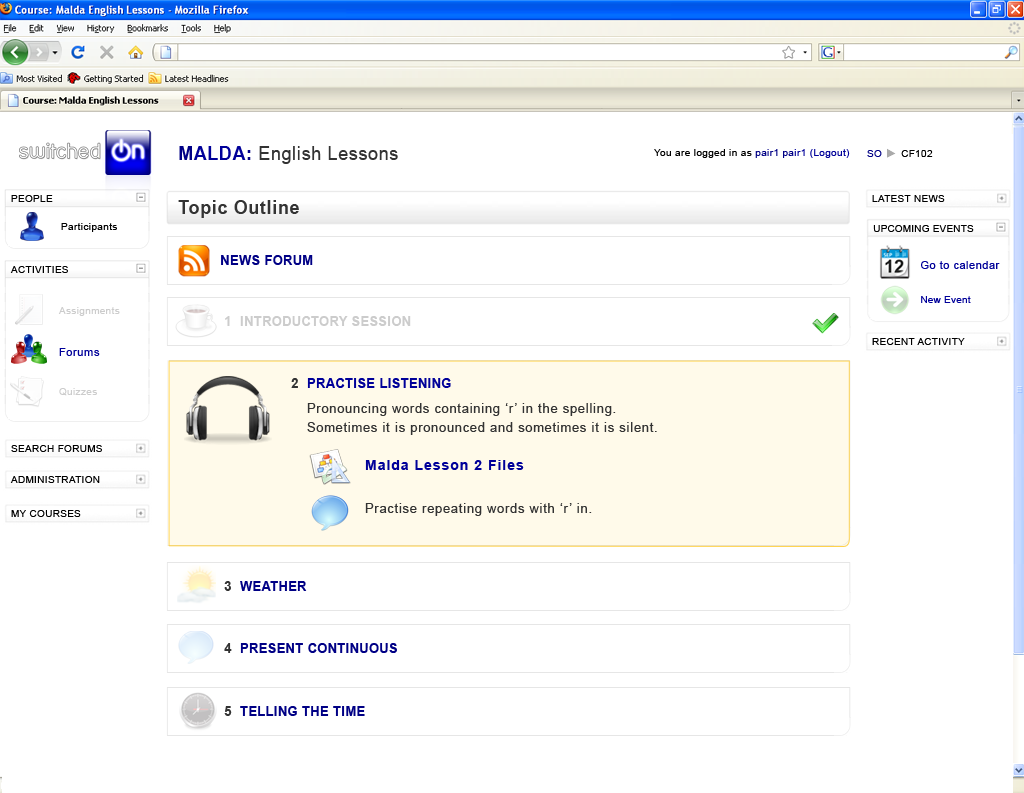
<style>
.page{position:relative;width:1024px;height:793px;background:#ffffff}
.page>*{position:absolute;margin:0}
.t1{font:19.4px "ArialMT";letter-spacing:0.05em;color:#333333;scale:0.9 1}
.t2{font:19.4px "Arial-BoldMT";letter-spacing:0.05em;color:#000085;scale:0.9 1}
.t3{font:19.4px "Arial-BoldMT";letter-spacing:0.05em;color:#000099;scale:0.9 1}
.t4{font:9.7px "ArialMT";letter-spacing:0.05em;color:#000000}
.t5{font:9.7px "ArialMT";letter-spacing:0.05em;color:#000085}
.t6{font:9.7px "ArialMT";letter-spacing:0.05em;color:#000099}
.t7{font:19.4px "Arial-BoldMT";letter-spacing:0.05em;color:#333333;scale:0.9 1}
.t8{font:9.6px "ArialMT";letter-spacing:0.05em;color:#000000}
.t9{font:13.9px "Arial-BoldMT";letter-spacing:0.05em;color:#000085;scale:0.9 1}
.t10{font:10.9px "ArialMT";letter-spacing:0.05em;color:#000099}
.t11{font:9.6px "ArialMT";letter-spacing:0.05em;color:#000099}
.t12{font:9.7px "ArialMT";letter-spacing:0.05em;color:#cccccc}
.t13{font:13.9px "Arial-BoldMT";letter-spacing:0.05em;color:#cccccc;scale:0.9 1}
.t14{font:11.1px "ArialMT";letter-spacing:0.05em;color:#000099}
.t15{font:13.9px "Arial-BoldMT";letter-spacing:0.05em;color:#000099;scale:0.9 1}
.t16{font:13.9px "Arial-BoldMT";letter-spacing:0.05em;color:#333333;scale:0.9 1}
.t17{font:12.5px/19.4px "ArialMT";letter-spacing:0.075em;color:#333333}
.t18{font:13.9px "Arial-BoldMT";letter-spacing:0.075em;color:#000099}
.t19{font:12.5px "ArialMT";letter-spacing:0.075em;color:#333333}
</style>
<div class="page">
<p class="t1" style="left:179px;top:146px;width:219px;height:18px"><span class="t2">M</span><span class="t3">ALDA</span><span class="t2">: </span>English Lessons</p>
<p class="t4" style="left:654px;top:149px;width:196px;height:9px">You are logged in as<span class="t5"> pair1 pa</span><span class="t6">ir1 (Logout)</span></p>
<p class="t4" style="left:867px;top:150px;width:66px;height:7px"><span class="t5">SO      </span>CF102</p>
<p class="t4" style="left:11px;top:195px;width:42px;height:7px">PEOPLE</p>
<p class="t4" style="left:872px;top:195px;width:73px;height:7px">LATEST NEWS</p>
<p class="t7" style="left:178px;top:200px;width:121px;height:18px">Topic Outline</p>
<p class="t4" style="left:61px;top:223px;width:56px;height:9px">Participants</p>
<p class="t8" style="left:873px;top:225px;width:101px;height:7px">UPCOMING EVENTS</p>
<p class="t9" style="left:221px;top:255px;width:92px;height:10px">NEWS FORUM</p>
<p class="t4" style="left:10px;top:266px;width:58px;height:7px">ACTIVITIES</p>
<p class="t10" style="left:921px;top:261px;width:79px;height:8px">Go to calendar</p>
<p class="t11" style="left:921px;top:296px;width:50px;height:7px">New Event</p>
<p class="t12" style="left:58px;top:307px;width:62px;height:9px">Assignments</p>
<p class="t13" style="left:225px;top:316px;width:186px;height:10px">1  INTRODUCTORY SESSION</p>
<p class="t4" style="left:872px;top:338px;width:93px;height:7px">RECENT ACTIVITY</p>
<p class="t14" style="left:59px;top:348px;width:41px;height:8px">Forums</p>
<p class="t12" style="left:59px;top:388px;width:38px;height:8px">Quizzes</p>
<p class="t15" style="left:291px;top:378px;width:160px;height:10px"><span class="t16">2</span>  PRACTISE LISTENING</p>
<p class="t17" style="left:307px;top:403px;width:350px;height:32px">Pronouncing words containing ‘r’ in the spelling.<br>Sometimes it is pronounced and sometimes it is silent.</p>
<p class="t4" style="left:11px;top:445px;width:91px;height:7px">SEARCH FORUMS</p>
<p class="t18" style="left:365px;top:460px;width:159px;height:10px">Malda Lesson 2 Files</p>
<p class="t4" style="left:10px;top:476px;width:90px;height:7px">ADMINISTRATION</p>
<p class="t4" style="left:11px;top:510px;width:70px;height:7px">MY COURSES</p>
<p class="t19" style="left:365px;top:503px;width:227px;height:13px">Practise repeating words with ‘r’ in.</p>
<p class="t9" style="left:224px;top:581px;width:83px;height:10px"><span class="t16">3</span>  WEATHER</p>
<p class="t9" style="left:224px;top:643px;width:173px;height:10px"><span class="t16">4</span>  PRESENT CONTINUOUS</p>
<p class="t9" style="left:224px;top:706px;width:141px;height:10px"><span class="t16">5</span>  TELLING THE TIME</p>
</div>
